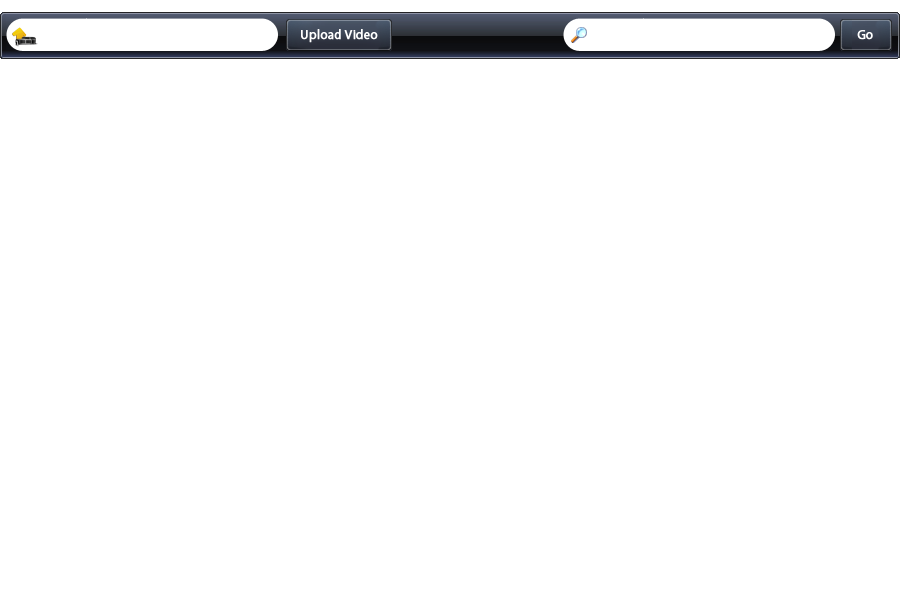
<style>
.page{position:relative;width:900px;height:600px;background:#ffffff}
.page>*{position:absolute;margin:0}
.t1{font:13px "MyriadPro-Regular";color:#ffffff;font-weight:bold}
</style>
<div class="page">
<p class="t1" style="left:301px;top:29px;width:77px;height:14px">Upload Video</p>
<p class="t1" style="left:857px;top:30px;width:16px;height:10px">Go</p>
</div>
